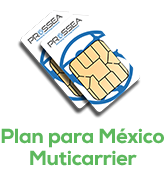
<style>
.page{position:relative;width:164px;height:181px;background:#ffffff}
.page>*{position:absolute;margin:0}
.t1{font:20.4px/21.6px "NexaHeavy";letter-spacing:-0.025em;color:#5cb85c}
</style>
<div class="page">
<p class="t1" style="left:1px;top:128px;width:163px;height:38px;text-align:center">Plan para México<br>Muticarrier</p>
</div>
